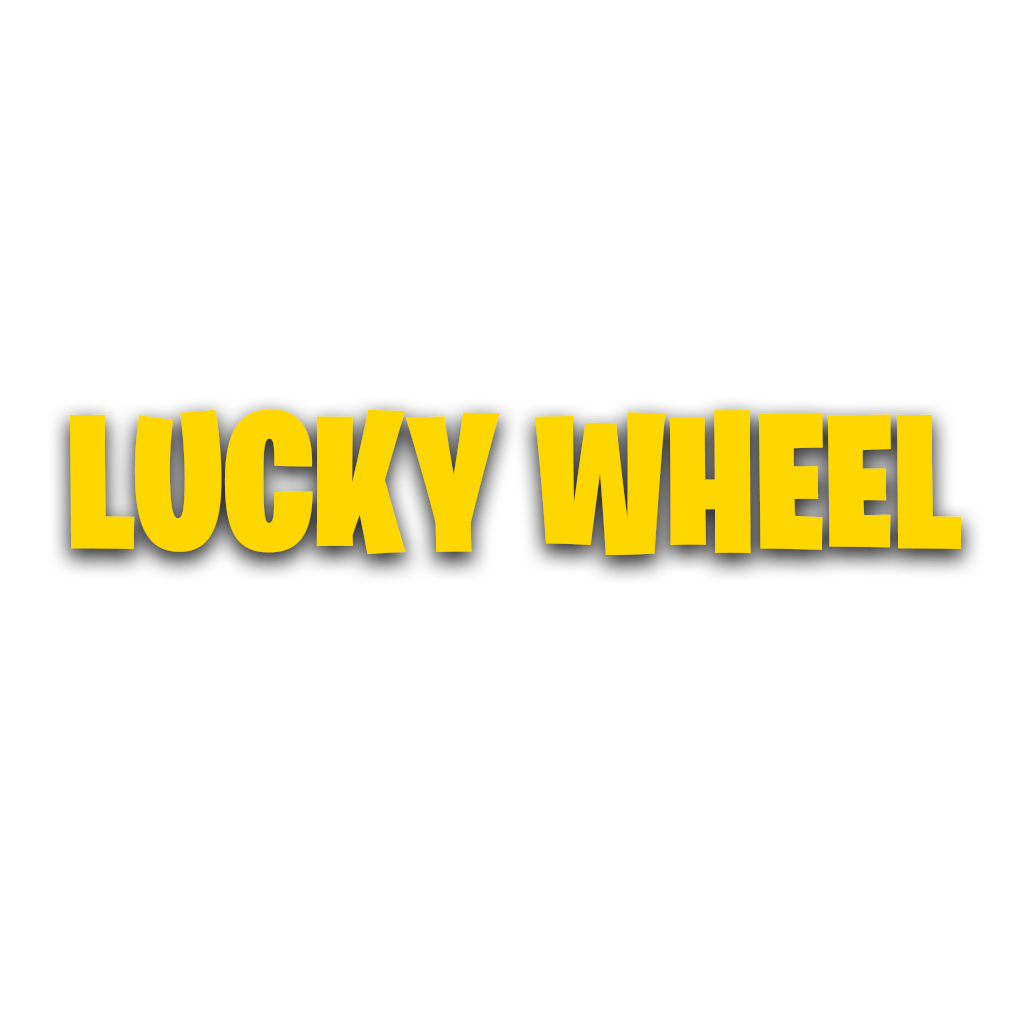
<style>
.page{position:relative;width:1024px;height:1024px;background:#ffffff}
.page>*{position:absolute;margin:0}
.t1{font:194.7px "BurbankBigCondensed-Black";color:#ffd700}
</style>
<div class="page">
<p class="t1" style="left:69px;top:409px;width:893px;height:146px">LUCKY WHEEL</p>
</div>
